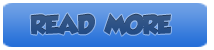
<style>
.page{position:relative;width:214px;height:50px}
.page>*{position:absolute;margin:0}
.t1{font:24px "GROBOLD";letter-spacing:-0.05em;color:#2c5286;text-transform:uppercase}
</style>
<div class="page">
<p class="t1" style="left:30px;top:13px;width:141px;height:23px">Read  More</p>
</div>
